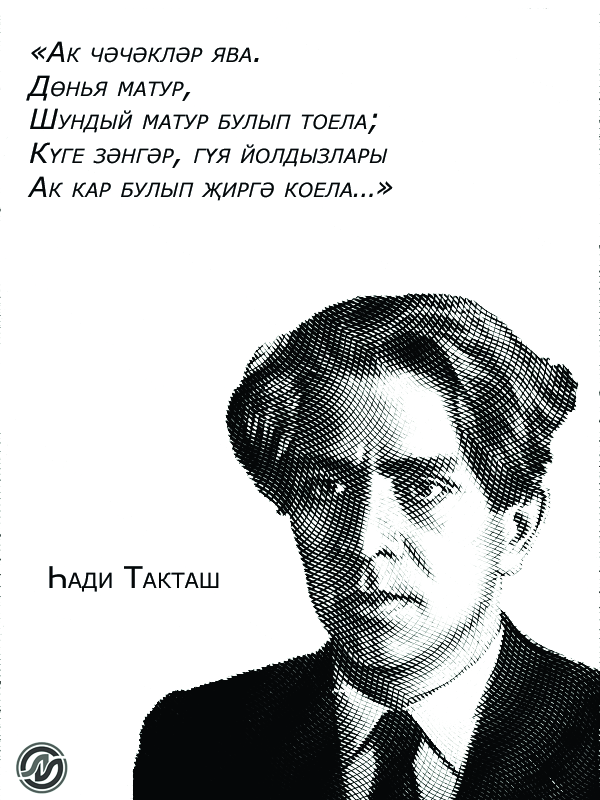
<style>
.page{position:relative;width:600px;height:800px;background:#ffffff}
.page>*{position:absolute;margin:0}
.t1{font:28px "Verdana-Italic";color:#000000;font-variant:small-caps}
.t2{font:30px "Verdana";color:#050708;font-variant:small-caps}
</style>
<div class="page">
<p class="t1" style="left:26px;top:41px;width:367px;height:160px">«Ак чәчәкләр ява.<br>Дөнья матур, <br>Шундый матур булып тоела;<br>Күге зәнгәр, гүя йолдызлары <br>Ак кар булып җиргә коела…»</p>
<p class="t2" style="left:49px;top:566px;width:170px;height:26px">Һади Такташ</p>
</div>
